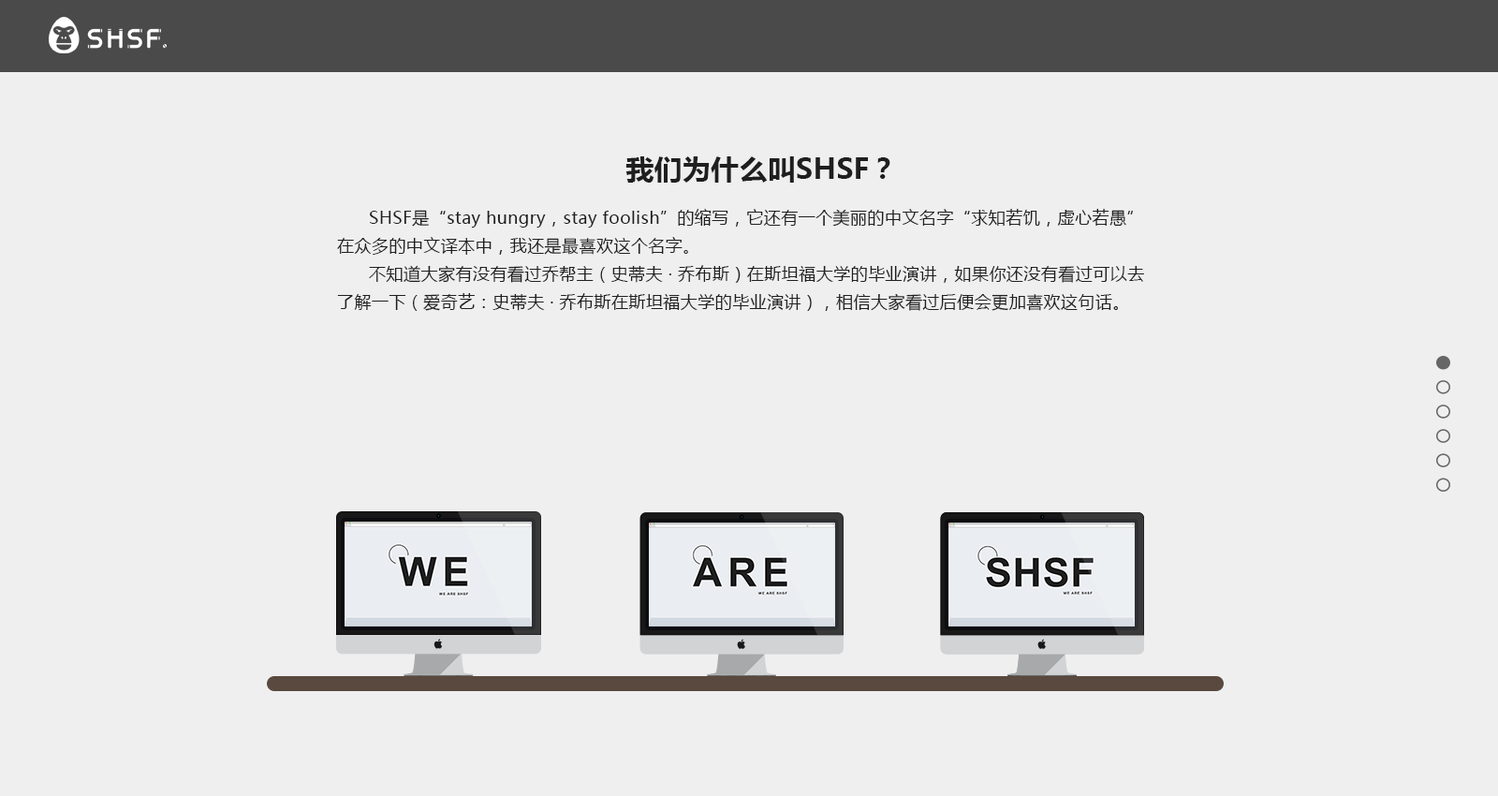
<style>
.page{position:relative;width:1498px;height:796px;background:#efefef}
.page>*{position:absolute;margin:0}
.t1{font:28.1px "MicrosoftYaHei-Bold";letter-spacing:0.01em;color:#1f1f1f}
.t2{font:16.9px/28.1px "MicrosoftYaHei";letter-spacing:0.02em;color:#1f1f1f}
</style>
<div class="page">
<p class="t1" style="left:625px;top:156px;width:265px;height:27px">我们为什么叫SHSF？</p>
<p class="t2" style="left:337px;top:209px;width:807px;height:102px">SHSF是“stay hungry，stay foolish”的缩写，它还有一个美丽的中文名字“求知若饥，虚心若愚”在众多的中文译本中，我还是最喜欢这个名字。<br>      不知道大家有没有看过乔帮主（史蒂夫 · 乔布斯）在斯坦福大学的毕业演讲，如果你还没有看过可以去了解一下（爱奇艺：史蒂夫 · 乔布斯在斯坦福大学的毕业演讲），相信大家看过后便会更加喜欢这句话。</p>
</div>
